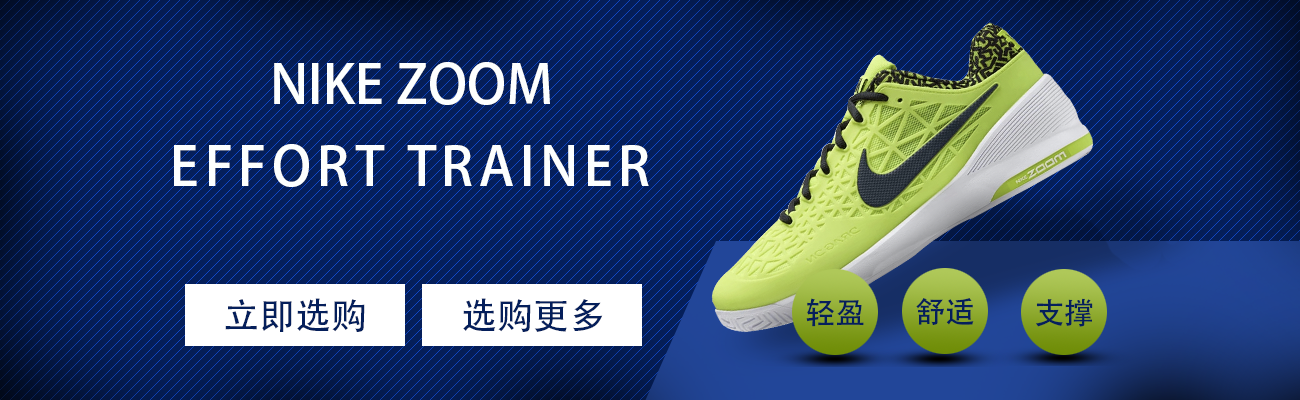
<style>
.page{position:relative;width:1300px;height:400px;background:#051f5b}
.page>*{position:absolute;margin:0}
.t1{font:54px "AdobeHeitiStd-Regular";color:#fdfffe;text-transform:uppercase}
.t2{font:54px "AdobeHeitiStd-Regular";letter-spacing:0.1em;color:#fdfffe;text-transform:uppercase}
.t3{font:36px "AdobeHeitiStd-Regular";color:#051f5b}
.t4{font:30.2px "AdobeHeitiStd-Regular";color:#051f5b}
</style>
<div class="page">
<p class="t1" style="left:274px;top:62px;width:276px;height:43px">NIKE zoom</p>
<p class="t2" style="left:174px;top:144px;width:475px;height:43px">effort trainer</p>
<p class="t3" style="left:225px;top:298px;width:140px;height:34px">立即选购</p>
<p class="t3" style="left:463px;top:298px;width:140px;height:34px">选购更多</p>
<p class="t4" style="left:806px;top:298px;width:58px;height:29px">轻盈</p>
<p class="t4" style="left:916px;top:298px;width:58px;height:27px">舒适</p>
<p class="t4" style="left:1036px;top:298px;width:57px;height:29px">支撑</p>
</div>
